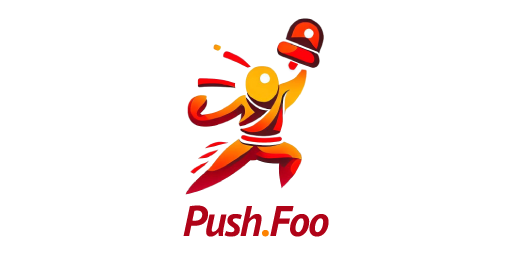
<style>
.page{position:relative;width:512px;height:256px;background:#ffffff}
.page>*{position:absolute;margin:0}
.t1{font:43px "PTSans-BoldItalic";letter-spacing:-0.044em;color:#b00318}
.t2{font:43px "PTSans-BoldItalic";letter-spacing:-0.044em;color:#fd8302}
</style>
<div class="page">
<p class="t1" style="left:183px;top:205px;width:146px;height:32px">Push<span class="t2">.</span>Foo</p>
</div>
